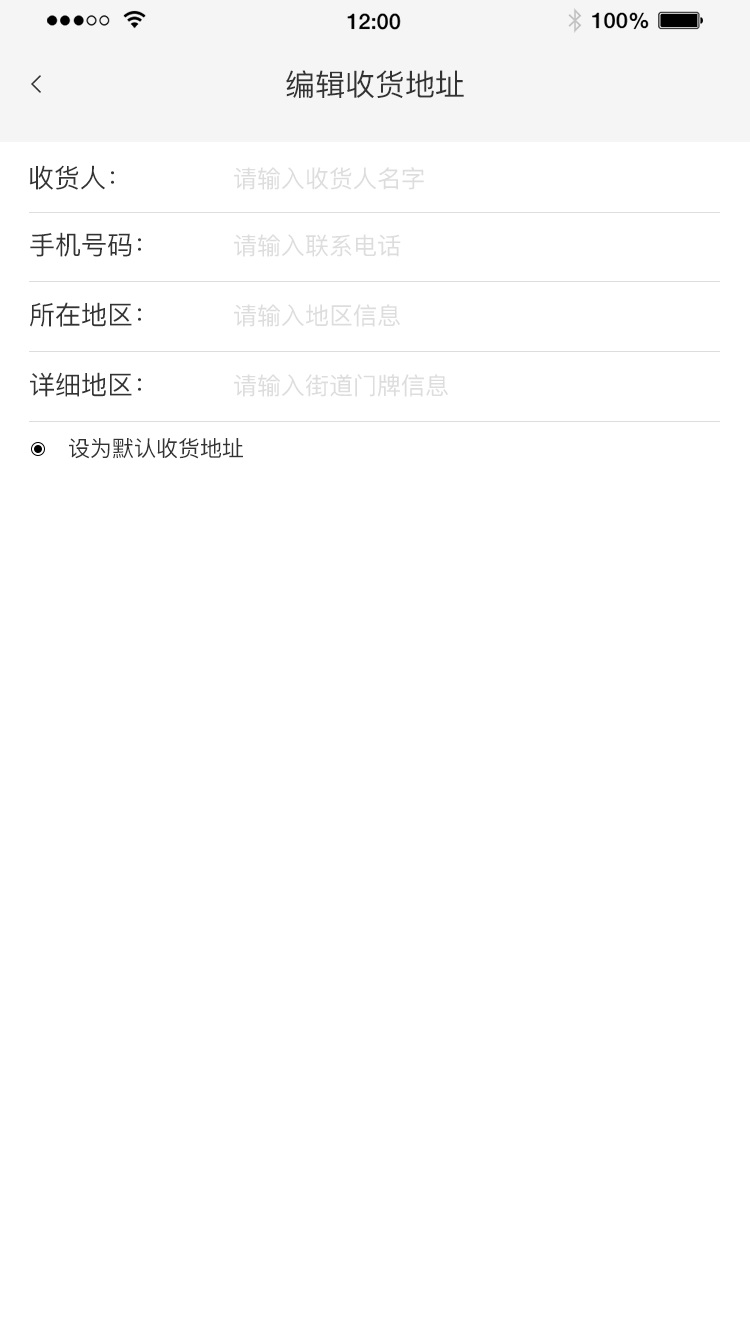
<style>
.page{position:relative;width:750px;height:1334px;background:#ffffff}
.page>*{position:absolute;margin:0}
.t1{font:30px "PingFangSC";color:#333333}
.t2{font:26px "PingFangSC";color:#333333}
.t3{font:24px "PingFangSC";color:#dddddd}
.t4{font:22px "PingFangSC";color:#333333}
</style>
<div class="page">
<p class="t1" style="left:286px;top:70px;width:178px;height:28px">编辑收货地址</p>
<p class="t2" style="left:29px;top:165px;width:85px;height:25px">收货人：</p>
<p class="t3" style="left:234px;top:167px;width:190px;height:23px">请输入收货人名字</p>
<p class="t2" style="left:30px;top:232px;width:111px;height:25px">手机号码：</p>
<p class="t3" style="left:234px;top:234px;width:167px;height:23px">请输入联系电话</p>
<p class="t2" style="left:30px;top:302px;width:111px;height:25px">所在地区：</p>
<p class="t3" style="left:234px;top:304px;width:166px;height:23px">请输入地区信息</p>
<p class="t2" style="left:30px;top:372px;width:111px;height:25px">详细地区：</p>
<p class="t3" style="left:234px;top:374px;width:214px;height:23px">请输入街道门牌信息</p>
<p class="t4" style="left:69px;top:438px;width:174px;height:21px">设为默认收货地址</p>
</div>
